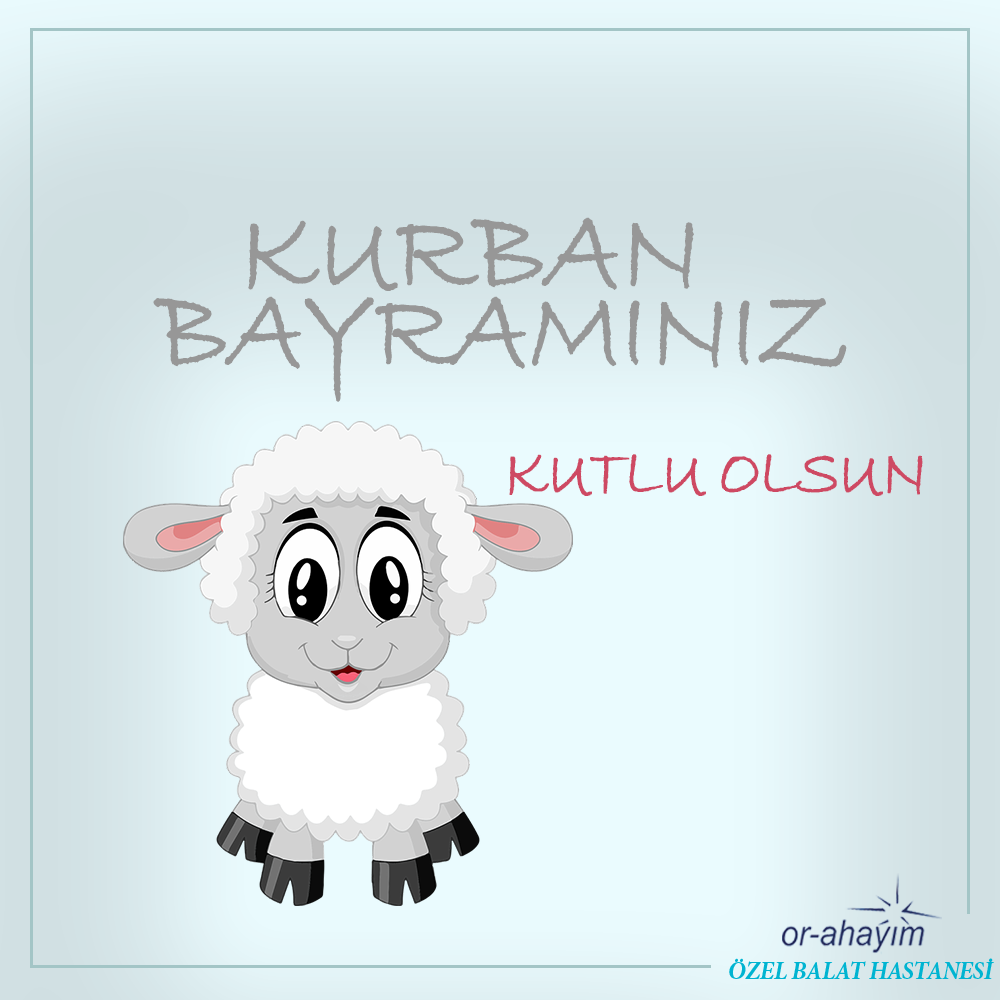
<style>
.page{position:relative;width:1000px;height:1000px}
.page>*{position:absolute;margin:0}
.t1{font:115.8px "BradleyHandITC";letter-spacing:-0.025em;color:#979797;font-weight:bold;scale:0.92 1}
.t2{font:68.6px "BradleyHandITC";letter-spacing:-0.025em;color:#ce4963;font-weight:bold;scale:0.86 1}
</style>
<div class="page">
<p class="t1" style="left:248px;top:217px;width:446px;height:74px">KURBAN</p>
<p class="t1" style="left:153px;top:296px;width:694px;height:106px">BAYRAMINIZ</p>
<p class="t2" style="left:509px;top:454px;width:414px;height:42px">KUTLU OLSUN</p>
</div>
